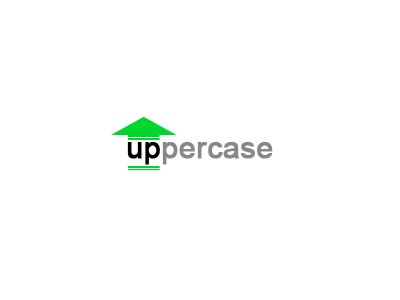
<style>
.page{position:relative;width:400px;height:300px;background:#ffffff}
.page>*{position:absolute;margin:0}
.t1{font:30px "ArialMT";color:#888686;font-weight:bold}
.t2{font:30px "ArialMT";color:#000000;font-weight:bold}
</style>
<div class="page">
<p class="t1" style="left:127px;top:142px;width:146px;height:23px"><span class="t2">up</span>percase</p>
</div>
